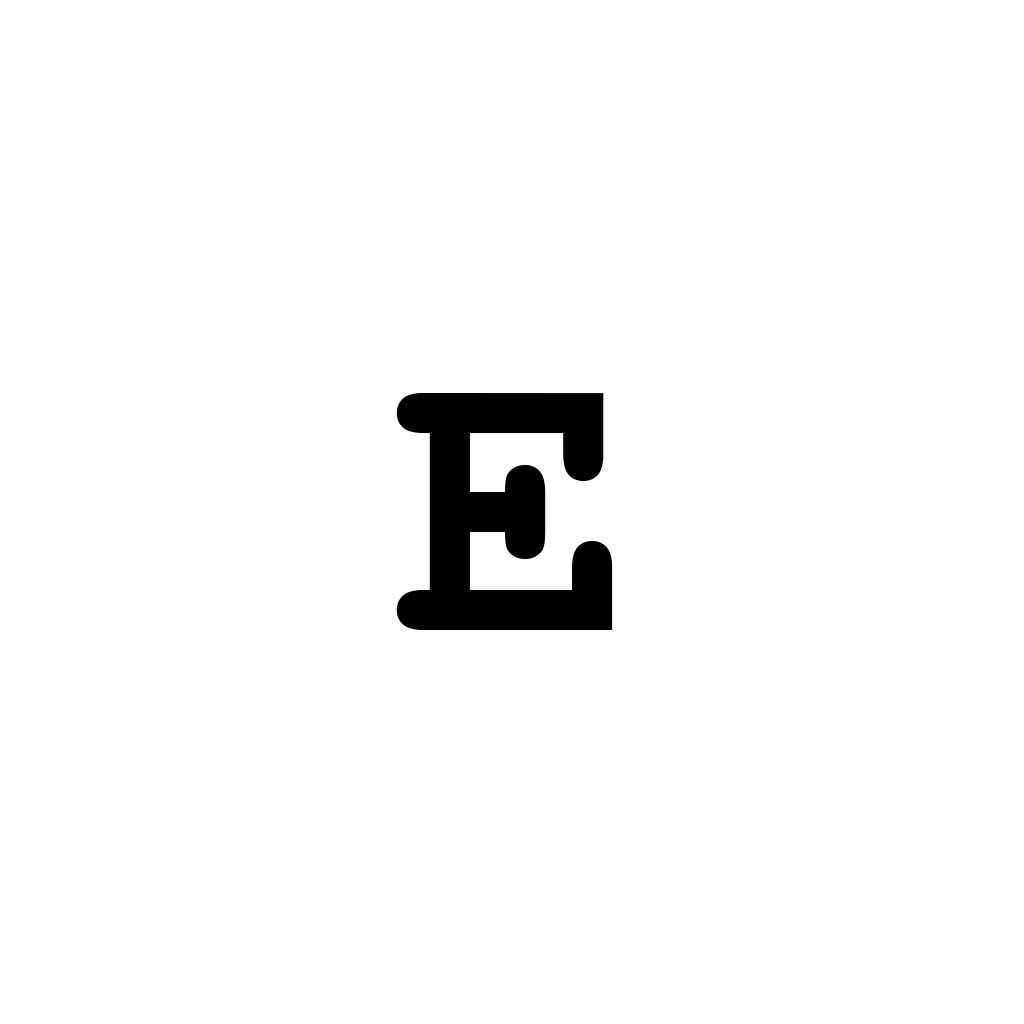
<style>
.page{position:relative;width:1024px;height:1024px;background:#ffffff}
.page>*{position:absolute;margin:0}
.t1{font:400px "CourierNewPS-BoldMT";color:#000000}
</style>
<div class="page">
<p class="t1" style="left:396px;top:393px;width:217px;height:237px">E</p>
</div>
